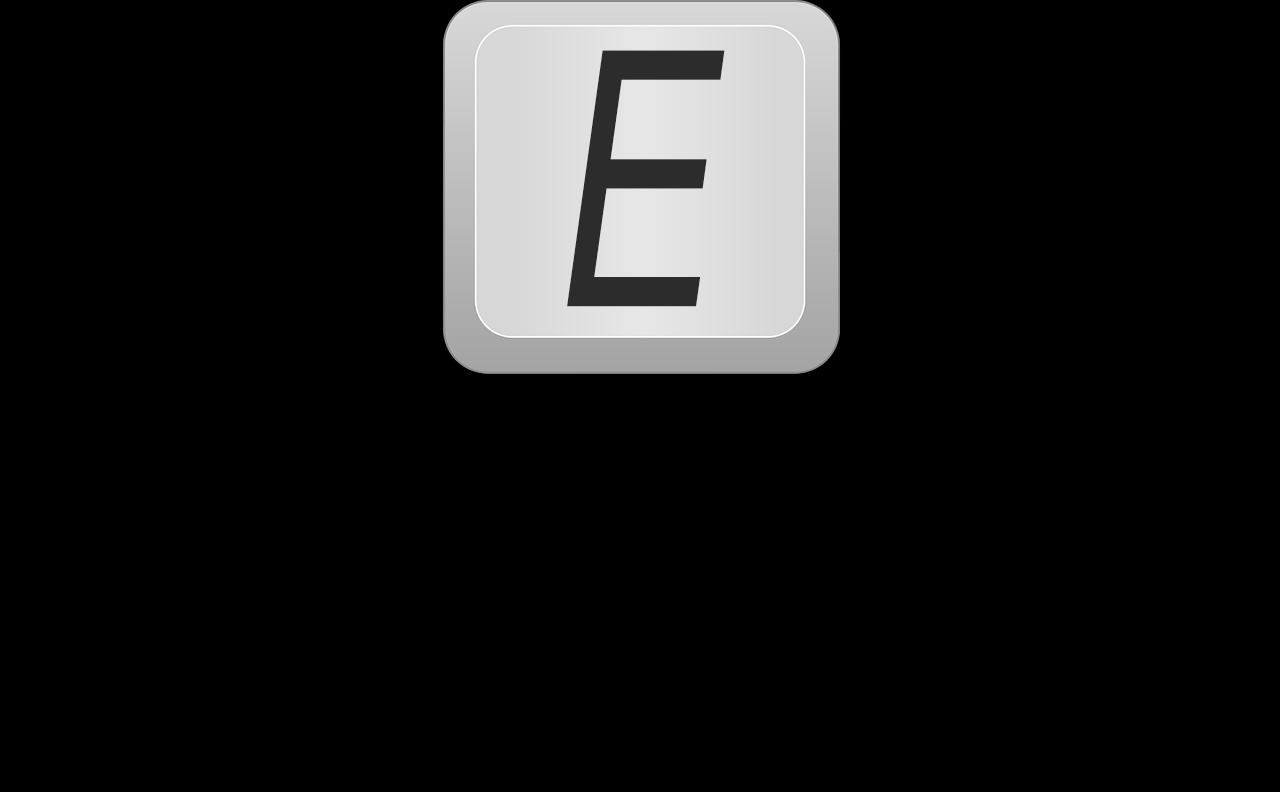
<style>
.page{position:relative;width:1280px;height:792px;background:#000000}
.page>*{position:absolute;margin:0}
.t1{font:356.9px "ArialNarrow-Italic";letter-spacing:-0.035em;color:#2c2c2c;scale:0.81 1}
</style>
<div class="page">
<p class="t1" style="left:567px;top:50px;width:158px;height:257px">Е</p>
</div>
